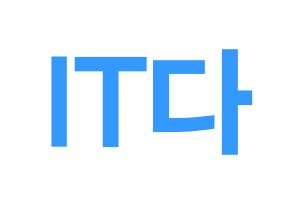
<style>
.page{position:relative;width:300px;height:200px;background:#ffffff}
.page>*{position:absolute;margin:0}
.t1{font:120px "YDYGO300-Bold";letter-spacing:-0.025em;color:#3399ff}
</style>
<div class="page">
<p class="t1" style="left:51px;top:49px;width:202px;height:106px">IT다</p>
</div>
